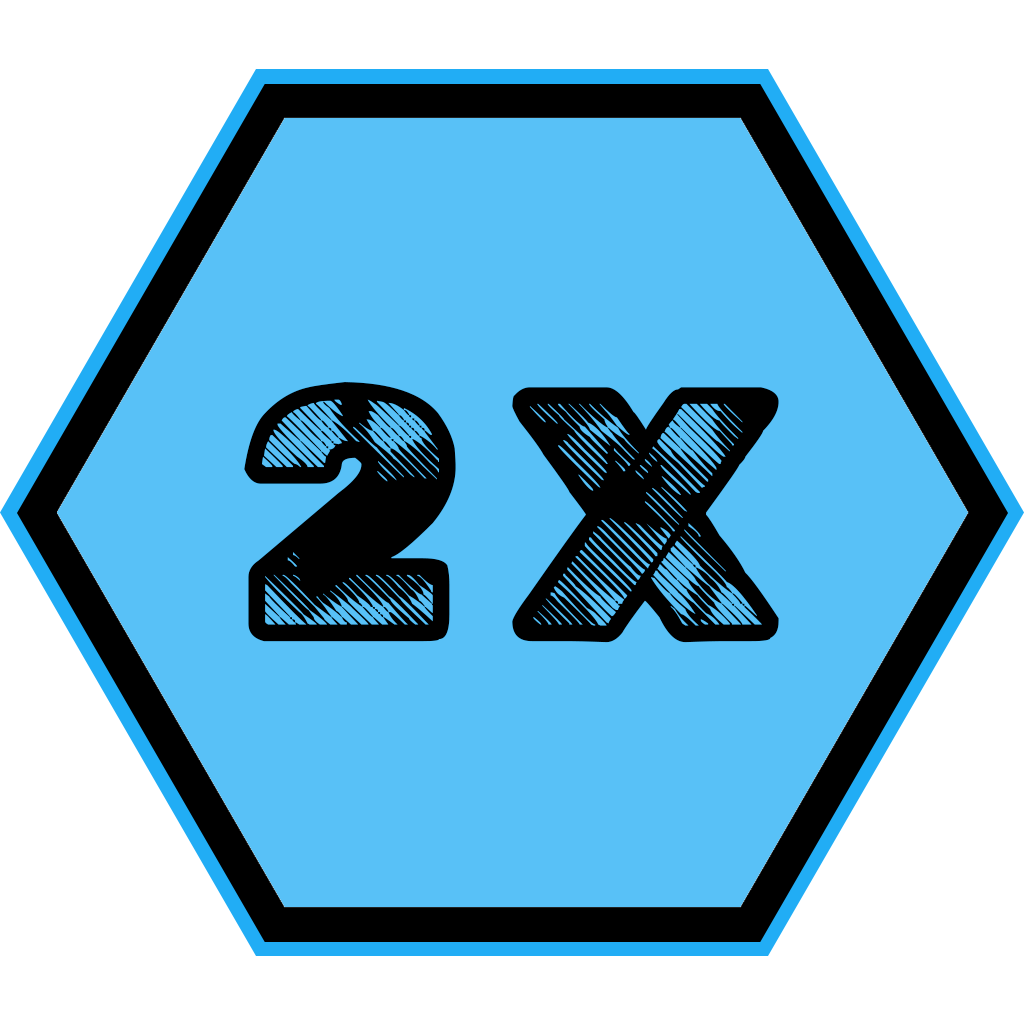
<style>
.page{position:relative;width:1024px;height:1024px;background:#58c1f7}
.page>*{position:absolute;margin:0}
.t1{font:250px "Search'nDestroy";letter-spacing:0.16em;color:#000000}
</style>
<div class="page">
<p class="t1" style="left:244px;top:382px;width:535px;height:261px">2X</p>
</div>
